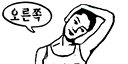
<style>
.page{position:relative;width:128px;height:64px;background:#ffffff}
.page>*{position:absolute;margin:0}
.t1{font:14px "KoreanYGYC-M";color:#000000}
</style>
<div class="page">
<p class="t1" style="left:10px;top:7px;width:32px;height:15px">오른쪽</p>
</div>
